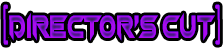
<style>
.page{position:relative;width:224px;height:48px;background:#ffffff}
.page>*{position:absolute;margin:0}
.t1{font:32.8px "Chopsic";letter-spacing:0.04em;scale:0.61 1}
.t2{font:43.5px "Chalkboard";letter-spacing:0.04em;scale:0.46 1}
.t3{font:43.5px "Chalkboard";letter-spacing:0.88em;scale:0.46 1}
</style>
<div class="page">
<p class="t1" style="left:3px;top:4px;width:217px;height:41px"><span class="t2">[</span>Director's Cut<span class="t3">]</span></p>
</div>
